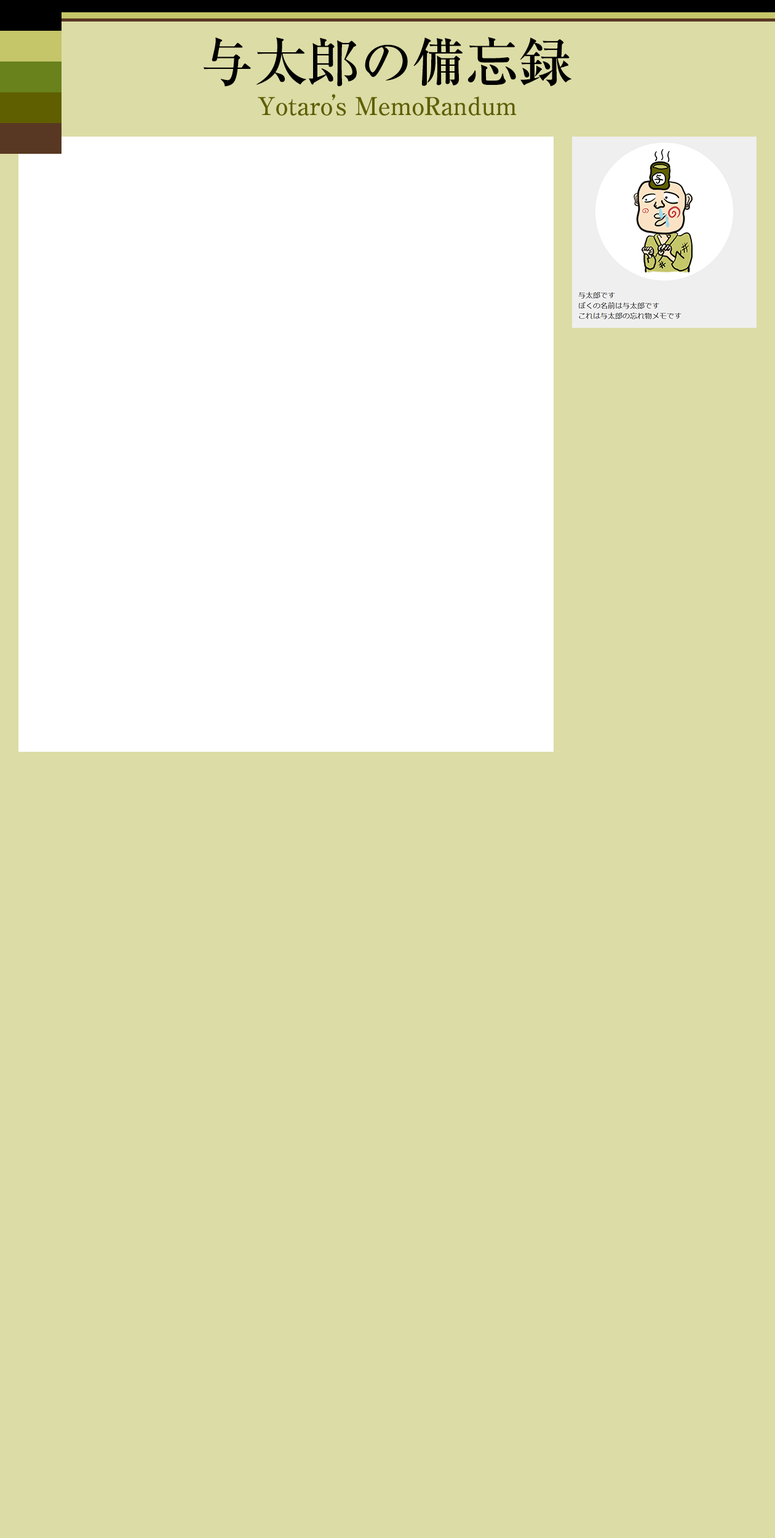
<style>
.page{position:relative;width:775px;height:1538px;background:#dcdca6}
.page>*{position:absolute;margin:0}
.t1{font:52.8px "RyuminPro-Medium";color:#000000}
.t2{font:24.6px "RyuminPro-Medium";color:#5f5f00}
</style>
<div class="page">
<p class="t1" style="left:203px;top:37px;width:369px;height:50px">与太郎の備忘録</p>
<p class="t2" style="left:258px;top:94px;width:259px;height:22px">Yotaro’s MemoRandum</p>
</div>
